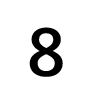
<style>
.page{position:relative;width:100px;height:100px;background:#ffffff}
.page>*{position:absolute;margin:0}
.t1{font:72px "Shruti-Bold";color:#000000}
</style>
<div class="page">
<p class="t1" style="left:29px;top:27px;width:34px;height:50px">8</p>
</div>
